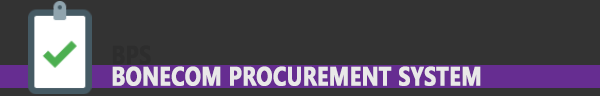
<style>
.page{position:relative;width:600px;height:96px;background:#333333}
.page>*{position:absolute;margin:0}
.t1{font:26.5px/21.2px "SegoeUI-Bold";color:#e9e8e8;font-weight:bold;scale:0.8 1}
.t2{font:26.5px/21.2px "SegoeUI-Bold";color:#2d2d2d;font-weight:bold;scale:0.8 1}
</style>
<div class="page">
<p class="t1" style="left:112px;top:45px;width:369px;height:41px"><span class="t2">BPS<br></span>BONECOM PROCUREMENT SYSTEM</p>
</div>
